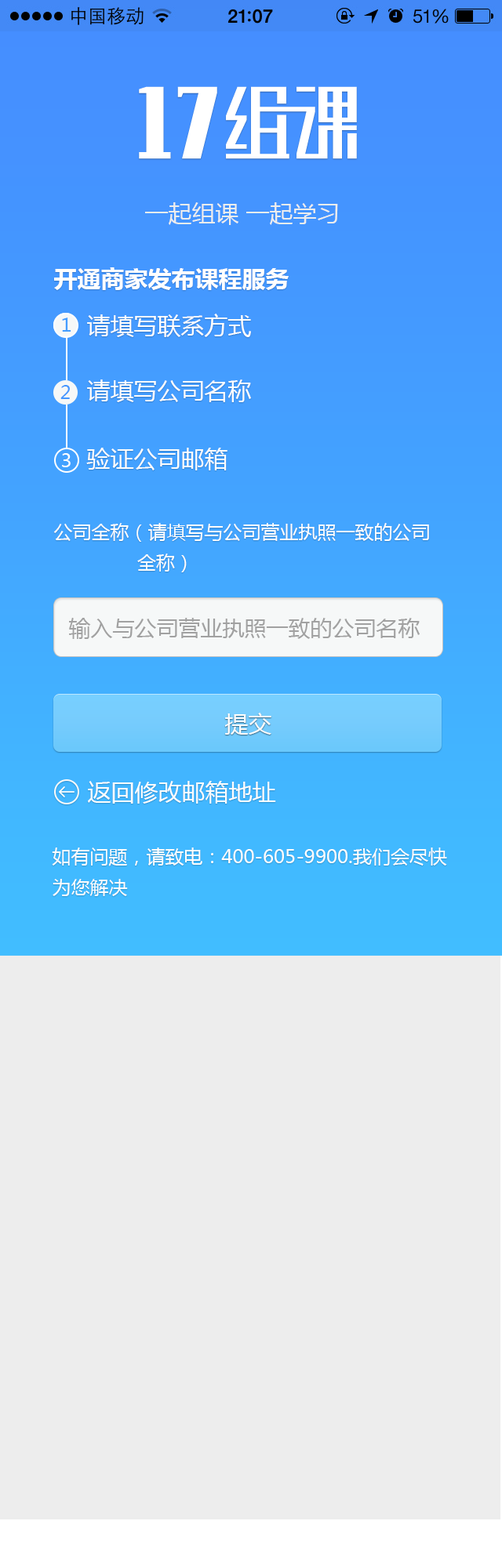
<style>
.page{position:relative;width:502px;height:1568px;background:#ededed}
.page>*{position:absolute;margin:0}
.t1{font:23.5px "MicrosoftYaHei";color:#ededed}
.t2{font:23.5px "MicrosoftYaHei-Bold";color:#fefefe}
.t3{font:18.8px "MicrosoftYaHei";color:#449dff}
.t4{font:23.5px "MicrosoftYaHei";color:#fefefe}
.t5{font:18.8px "MicrosoftYaHei";color:#4497ff}
.t6{font:18.8px "MicrosoftYaHei";color:#ffffff}
.t7{font:18.8px "MicrosoftYaHei";color:#fefefe}
.t8{font:22px "MicrosoftYaHei";color:#a1a1a1}
</style>
<div class="page">
<p class="t1" style="left:145px;top:202px;width:193px;height:23px">一起组课 一起学习</p>
<p class="t2" style="left:54px;top:267px;width:235px;height:23px">开通商家发布课程服务</p>
<p class="t3" style="left:62px;top:318px;width:9px;height:14px">1</p>
<p class="t4" style="left:87px;top:314px;width:164px;height:23px">请填写联系方式</p>
<p class="t5" style="left:60px;top:385px;width:10px;height:14px">2</p>
<p class="t4" style="left:87px;top:379px;width:164px;height:23px">请填写公司名称</p>
<p class="t4" style="left:86px;top:448px;width:141px;height:22px">验证公司邮箱</p>
<p class="t6" style="left:62px;top:453px;width:9px;height:14px">3</p>
<p class="t7" style="left:53px;top:523px;width:376px;height:49px">公司全称（请填写与公司营业执照一致的公司<br>               全称）</p>
<p class="t8" style="left:69px;top:618px;width:350px;height:21px">输入与公司营业执照一致的公司名称</p>
<p class="t4" style="left:225px;top:713px;width:46px;height:22px">提交</p>
<p class="t4" style="left:88px;top:781px;width:188px;height:23px">返回修改邮箱地址</p>
<p class="t7" style="left:52px;top:848px;width:395px;height:48px">如有问题，请致电：400-605-9900.我们会尽快<br>为您解决</p>
</div>
